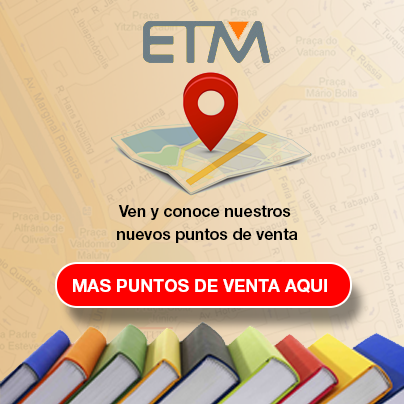
<style>
.page{position:relative;width:404px;height:404px}
.page>*{position:absolute;margin:0}
.t1{font:16px "HelveticaNeueLTStd-Bd";color:#000000}
.t2{font:17.3px "HelveticaNeueLTStd-Bd";color:#ffffff}
</style>
<div class="page">
<p class="t1" style="left:117px;top:205px;width:181px;height:38px;text-align:center">Ven y conoce nuestros <br>nuevos puntos de venta</p>
<p class="t2" style="left:73px;top:279px;width:254px;height:14px">MAS PUNTOS DE VENTA AQUI</p>
</div>
